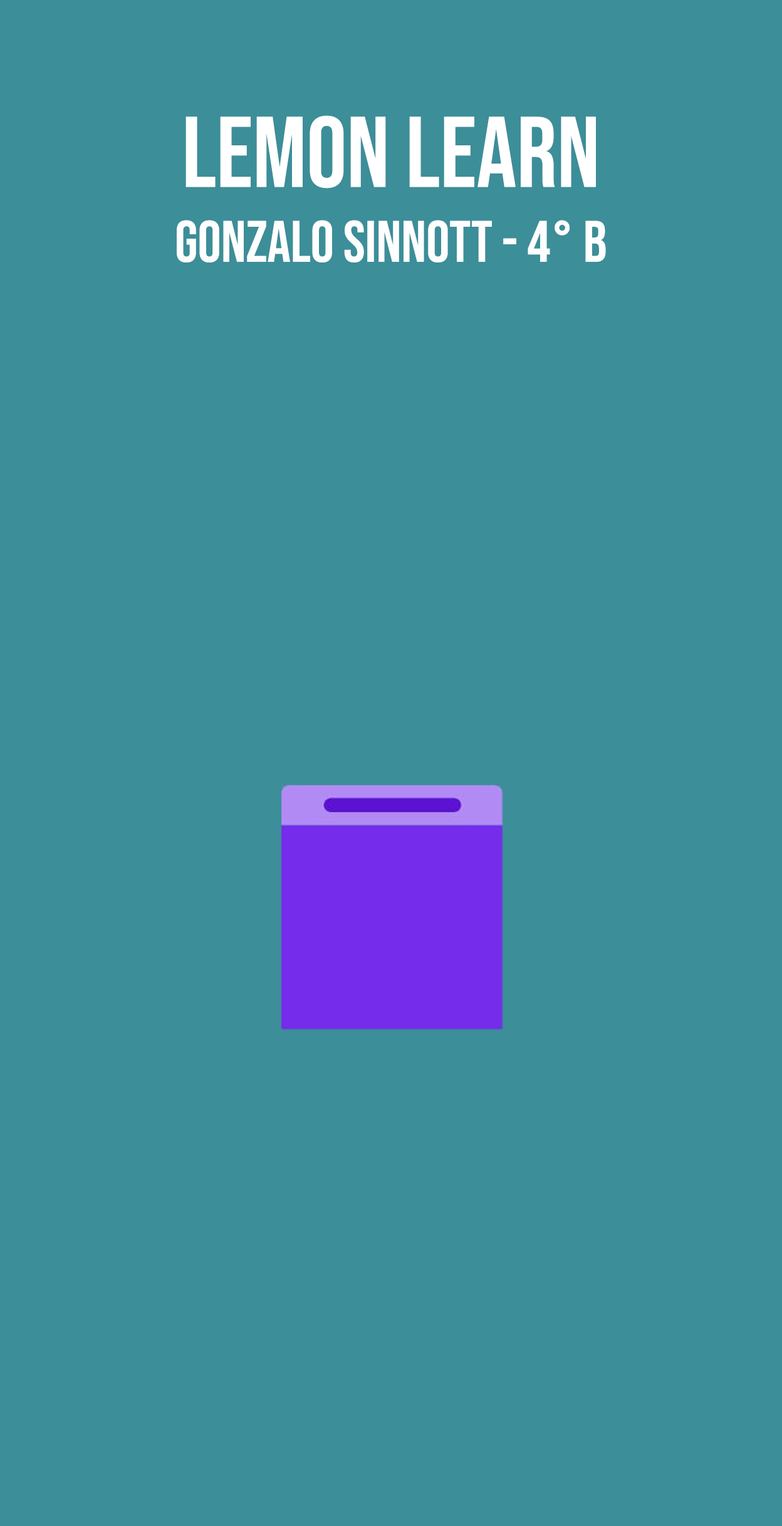
<style>
.page{position:relative;width:782px;height:1526px;background:#3c8e99}
.page>*{position:absolute;margin:0}
.t1{font:100.2px "BebasNeue-Regular";color:#ffffff}
.t2{font:58.5px "BebasNeue-Regular";color:#fefefe}
</style>
<div class="page">
<p class="t1" style="left:185px;top:115px;width:411px;height:74px">LEMON LEARN</p>
<p class="t2" style="left:177px;top:220px;width:429px;height:42px">GONZALO SINNOTT - 4° B</p>
</div>
